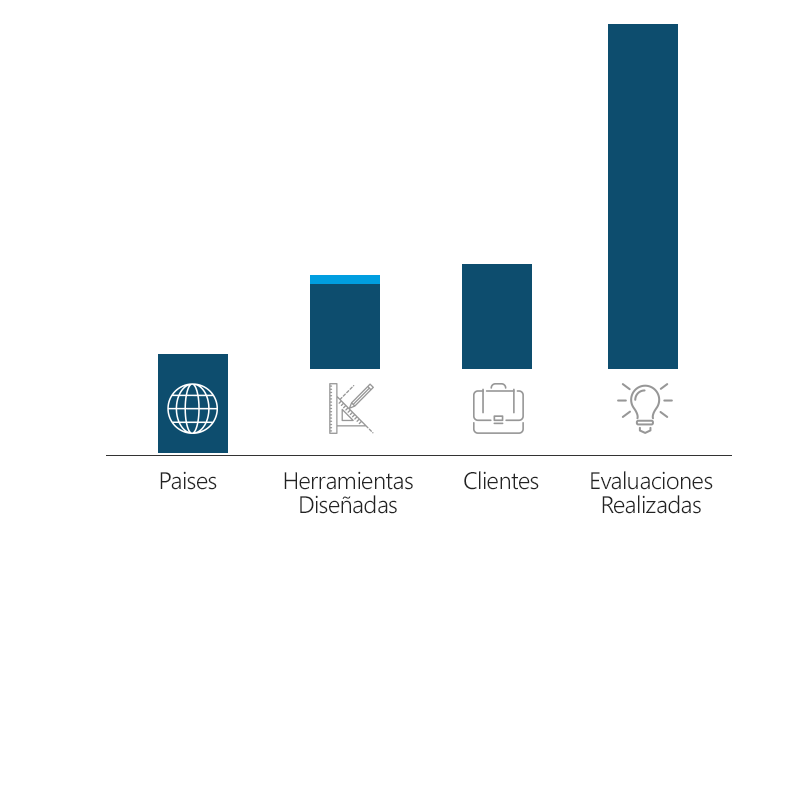
<style>
.page{position:relative;width:800px;height:800px;background:#ffffff}
.page>*{position:absolute;margin:0}
.t1{font:24px "NirmalaUI-Semilight";letter-spacing:-0.025em;color:#222222}
.t2{font:24px/24px "NirmalaUI-Semilight";letter-spacing:-0.025em;color:#222222}
</style>
<div class="page">
<p class="t1" style="left:160px;top:471px;width:57px;height:19px">Paises</p>
<p class="t2" style="left:284px;top:471px;width:129px;height:43px;text-align:center">Herramientas<br>Diseñadas</p>
<p class="t1" style="left:464px;top:471px;width:75px;height:19px">Clientes</p>
<p class="t2" style="left:591px;top:471px;width:122px;height:43px;text-align:center">Evaluaciones<br>Realizadas</p>
</div>
